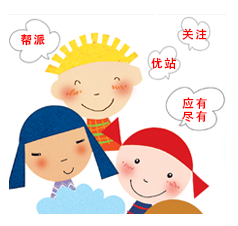
<style>
.page{position:relative;width:238px;height:226px;background:#ffffff}
.page>*{position:absolute;margin:0}
.t1{font:12px "AdobeHeitiStd-Regular";letter-spacing:0.1em;color:#ff0000}
.t2{font:12px "FZDHTJW--GB1-0";letter-spacing:0.1em;color:#ff0000}
.t3{font:12px/13.3px "AdobeHeitiStd-Regular";letter-spacing:0.1em;color:#ff0000}
</style>
<div class="page">
<p class="t1" style="left:182px;top:28px;width:25px;height:12px">关注</p>
<p class="t2" style="left:21px;top:34px;width:24px;height:12px">帮派</p>
<p class="t1" style="left:151px;top:57px;width:25px;height:13px">优站</p>
<p class="t3" style="left:182px;top:97px;width:25px;height:25px">应有<br>尽有</p>
</div>
